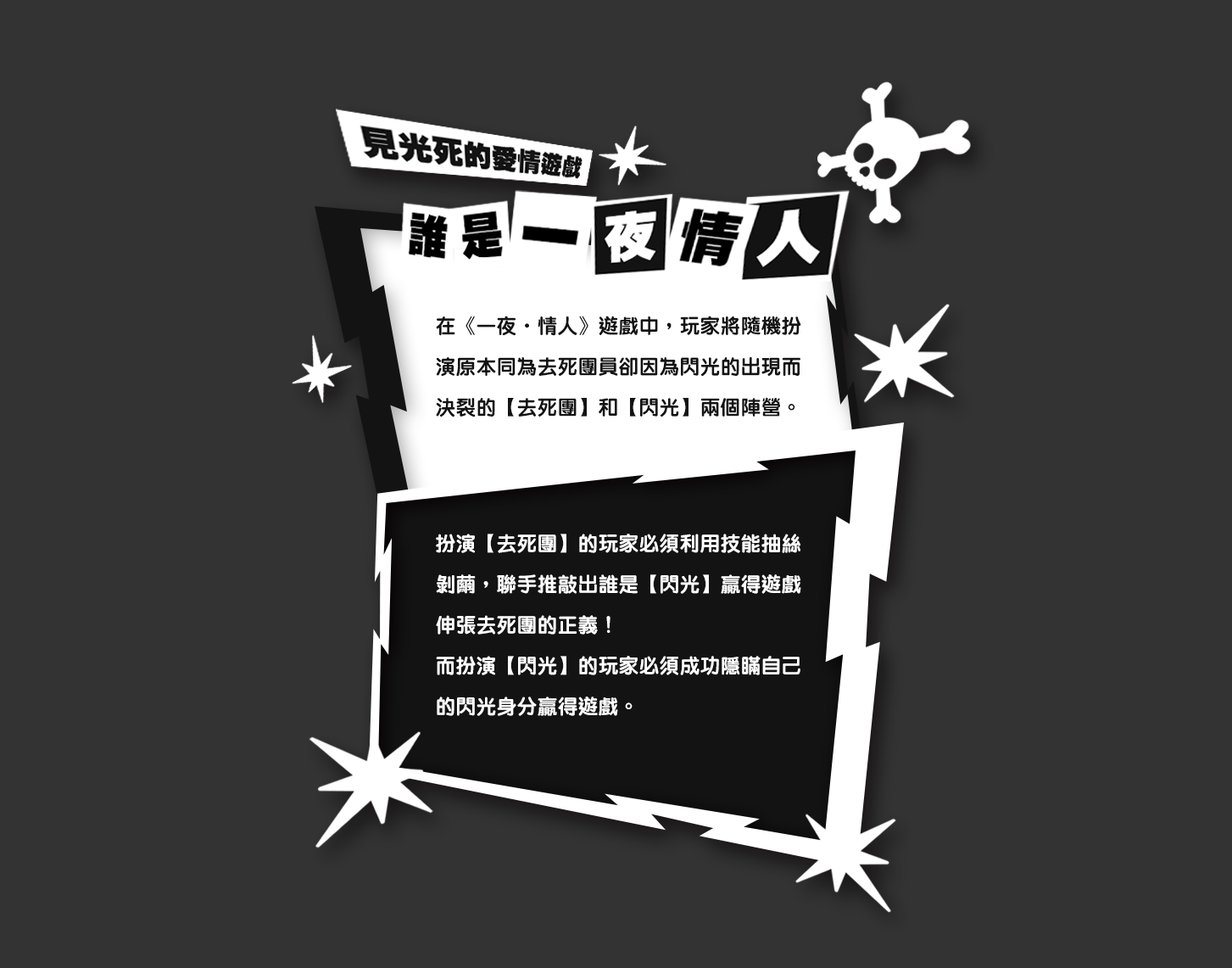
<style>
.page{position:relative;width:1232px;height:968px;background:#333333}
.page>*{position:absolute;margin:0}
.t1{font:20.4px/40.7px "MYuenHK-Xbold";color:#131313}
.t2{font:20.4px/40.7px "MYuenHK-Xbold";color:#ffffff}
</style>
<div class="page">
<p class="t1" style="left:436px;top:315px;width:365px;height:102px">在《一夜．情人》遊戲中，玩家將隨機扮演原本同為去死團員卻因為閃光的出現而決裂的【去死團】和【閃光】兩個陣營。</p>
<p class="t2" style="left:436px;top:533px;width:365px;height:183px">扮演【去死團】的玩家必須利用技能抽絲剝繭，聯手推敲出誰是【閃光】贏得遊戲伸張去死團的正義！<br>而扮演【閃光】的玩家必須成功隱瞞自己的閃光身分贏得遊戲。</p>
</div>
